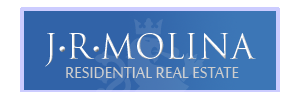
<style>
.page{position:relative;width:300px;height:92px;background:#3163a8}
.page>*{position:absolute;margin:0}
.t1{font:33.3px "TrajanPro-Regular";color:#ffffff}
.t2{font:33.3px "Existence-Light";color:#ffffff}
.t3{font:20.8px "SakkalMajalla";color:#cccccc;text-transform:uppercase}
</style>
<div class="page">
<p class="t1" style="left:45px;top:33px;width:211px;height:34px">J<span class="t2">•</span>R<span class="t2">•</span>MOLINA</p>
<p class="t3" style="left:66px;top:67px;width:173px;height:11px">residential real estate</p>
</div>
